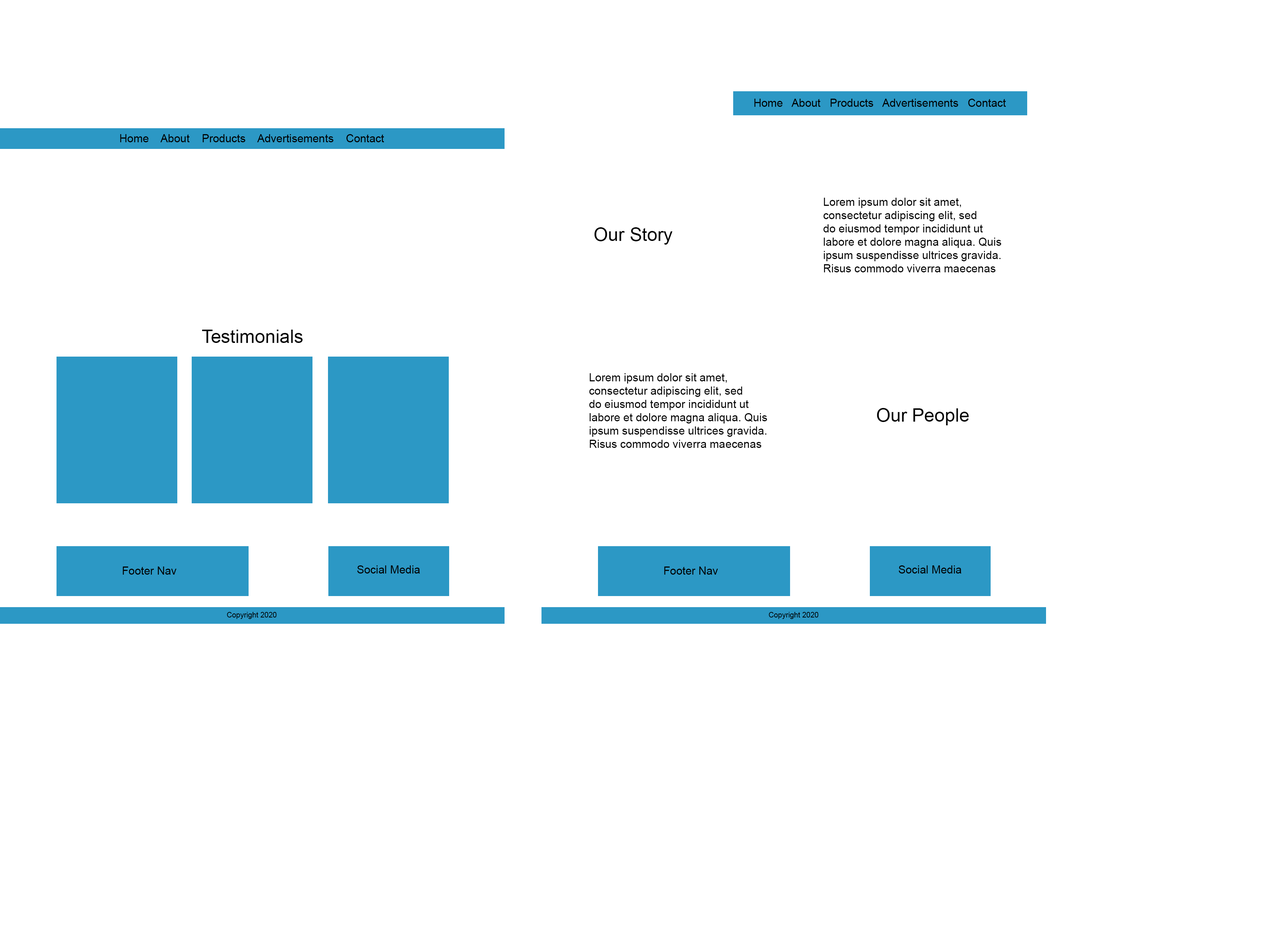
<style>
.page{position:relative;width:1261px;height:946px;background:#ffffff}
.page>*{position:absolute;margin:0}
.t1{font:11.1px "ArialMT";color:#000000}
.t2{font:18.5px "ArialMT";color:#000000}
.t3{font:7.4px "ArialMT";color:#000000}
</style>
<div class="page">
<p class="t1" style="left:754px;top:99px;width:252px;height:8px">Home   About   Products   Advertisements   Contact</p>
<p class="t1" style="left:120px;top:134px;width:264px;height:8px">Home    About    Products    Advertisements    Contact</p>
<p class="t1" style="left:823px;top:198px;width:178px;height:74px">Lorem ipsum dolor sit amet, consectetur adipiscing elit, sed do eiusmod tempor incididunt ut labore et dolore magna aliqua. Quis ipsum suspendisse ultrices gravida. Risus commodo viverra maecenas accumsan lacus vel facilisis.</p>
<p class="t2" style="left:594px;top:227px;width:79px;height:18px">Our Story</p>
<p class="t2" style="left:202px;top:329px;width:101px;height:14px">Testimonials</p>
<p class="t1" style="left:589px;top:373px;width:178px;height:75px">Lorem ipsum dolor sit amet, consectetur adipiscing elit, sed do eiusmod tempor incididunt ut labore et dolore magna aliqua. Quis ipsum suspendisse ultrices gravida. Risus commodo viverra maecenas accumsan lacus vel facilisis.</p>
<p class="t2" style="left:877px;top:408px;width:92px;height:17px">Our People</p>
<p class="t1" style="left:123px;top:566px;width:54px;height:8px">Footer Nav</p>
<p class="t1" style="left:357px;top:565px;width:63px;height:8px">Social Media</p>
<p class="t1" style="left:664px;top:566px;width:54px;height:8px">Footer Nav</p>
<p class="t1" style="left:899px;top:565px;width:62px;height:8px">Social Media</p>
<p class="t3" style="left:227px;top:612px;width:50px;height:7px">Copyright 2020</p>
<p class="t3" style="left:769px;top:612px;width:50px;height:7px">Copyright 2020</p>
</div>
